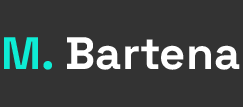
<style>
.page{position:relative;width:243px;height:107px;background:#333333}
.page>*{position:absolute;margin:0}
.t1{font:45.5px "SpaceGrotesk-Bold";color:#ffffff}
.t2{font:45.5px "SpaceGrotesk-Bold";color:#0eecd5}
</style>
<div class="page">
<p class="t1" style="left:4px;top:37px;width:236px;height:33px"><span class="t2">M. </span>Bartena</p>
</div>
